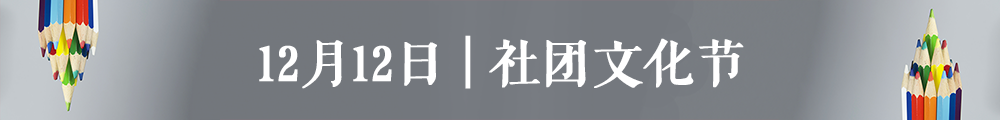
<style>
.page{position:relative;width:1000px;height:120px}
.page>*{position:absolute;margin:0}
.t1{font:50px "FZQKBYSJW--GB1-0";color:#ffffff;font-weight:bold}
.t2{font:58.5px "FZQKBYSJW--GB1-0";color:#ffffff;font-weight:bold}
</style>
<div class="page">
<p class="t1" style="left:259px;top:35px;width:485px;height:54px">12月12日<span class="t2"> | </span>社团文化节</p>
</div>
